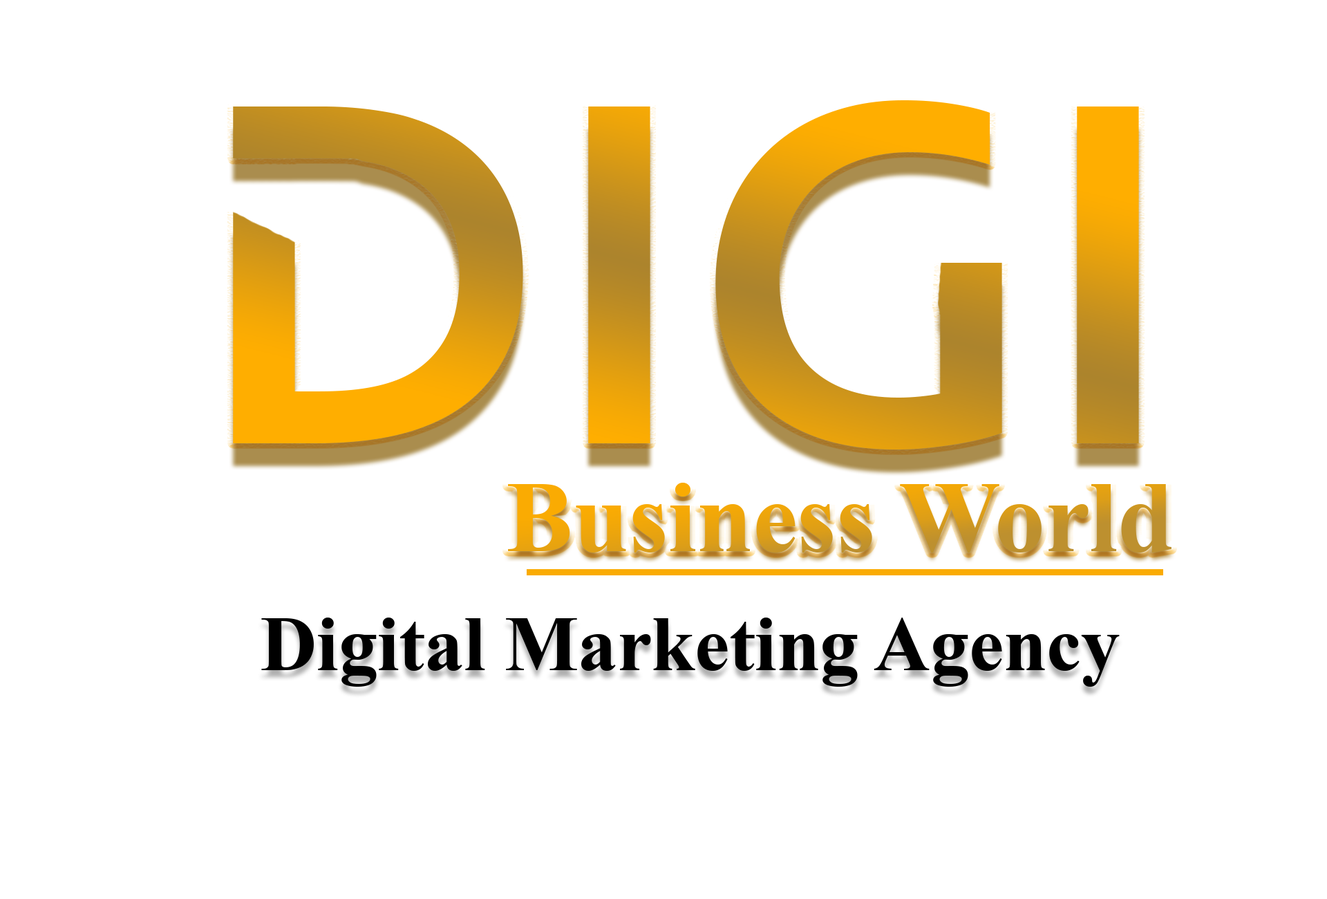
<style>
.page{position:relative;width:1327px;height:899px;background:#ffffff}
.page>*{position:absolute;margin:0}
.t1{font:100.8px "TimesNewRomanPS-BoldMT"}
.t2{font:77.8px "TimesNewRomanPS-BoldMT";color:#000000}
</style>
<div class="page">
<p class="t1" style="left:508px;top:482px;width:664px;height:70px">Business World</p>
<p class="t2" style="left:261px;top:617px;width:859px;height:69px">Digital Marketing Agency</p>
</div>
